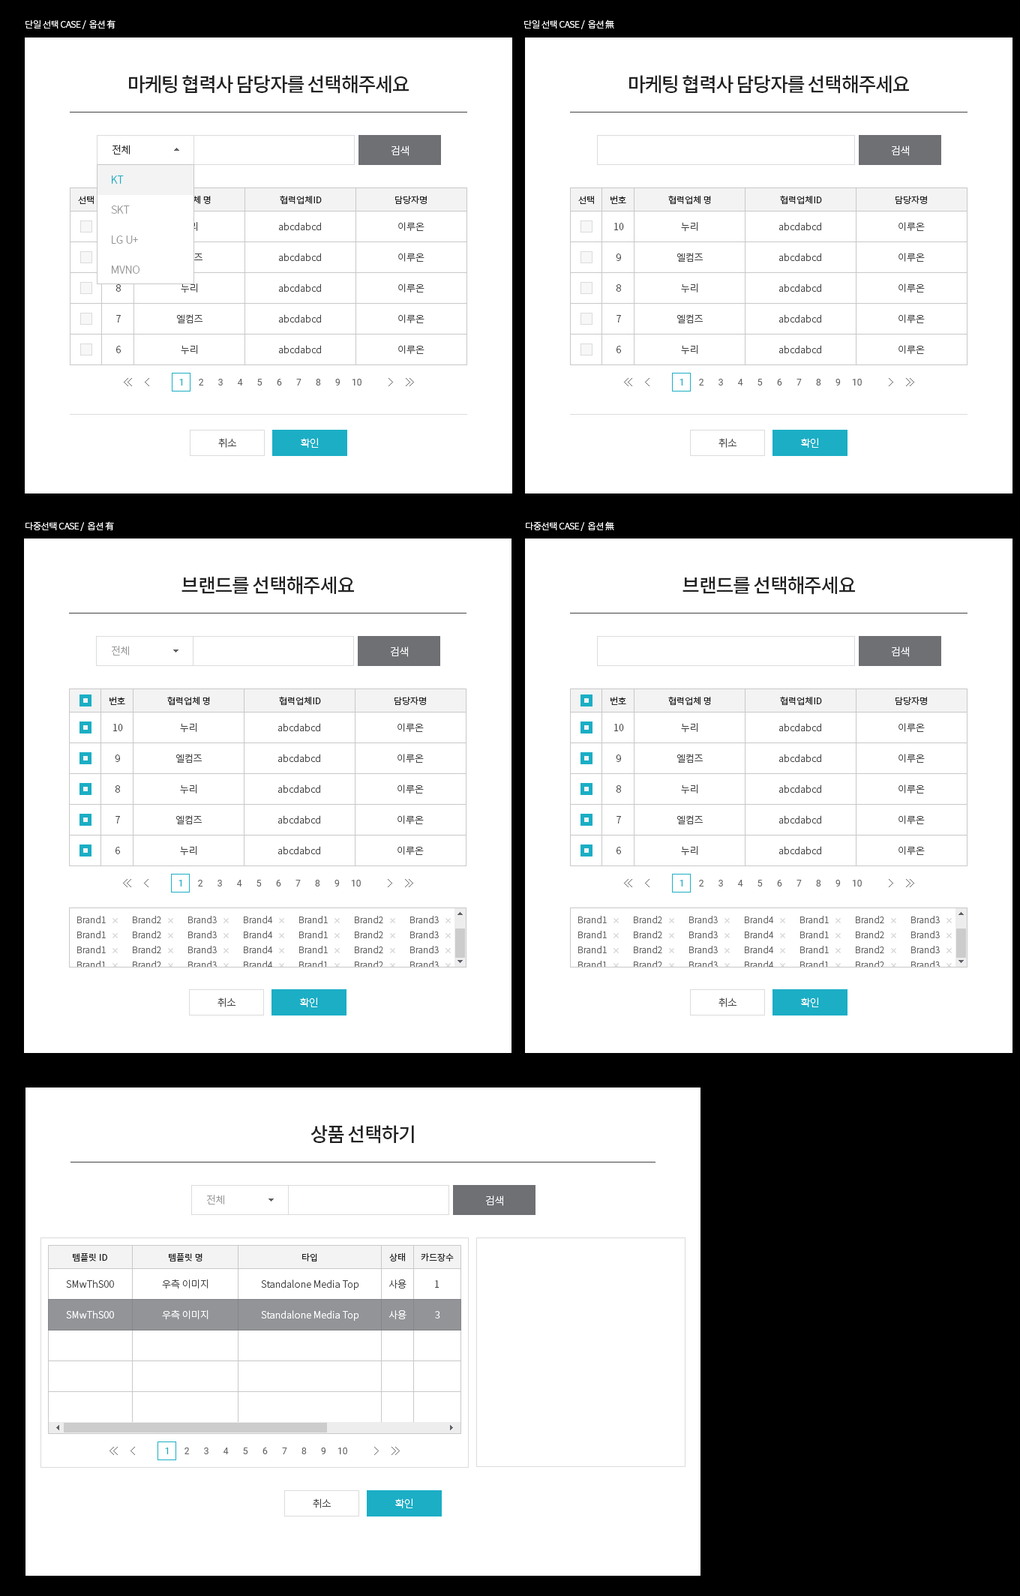
<style>
.page{position:relative;width:1020px;height:1596px;background:#ffffff}
.page>*{position:absolute;margin:0}
.t1{font:9px "NotoSansCJKkr-Light";letter-spacing:-0.03em;color:#ffffff}
.t2{font:19.5px "NotoSansCJKkr-Medium";letter-spacing:-0.05em;color:#222222;text-transform:uppercase}
.t3{font:10.5px "NotoSansCJKkr-Light";letter-spacing:-0.05em;color:#222222}
.t4{font:10.5px "NotoSansCJKkr-Light";letter-spacing:-0.05em;color:#ffffff}
.t5{font:10.5px/30px "NotoSansCJKkr-Light";color:#999999}
.t6{font:10.5px/30px "NotoSansCJKkr-Light";color:#1baec5}
.t7{font:9px "NotoSansCJKkr-Regular";color:#222222}
.t8{font:9px "NotoSansCJKkr-Regular"}
.t9{font:9.8px/30.8px "NotoSansCJKkr-Light";color:#444444}
.t10{font:9.8px/30.8px "NotoSansCJKkr-Light"}
.t11{font:9px "Roboto-Regular";color:#1baec5}
.t12{font:9px "Roboto-Regular";color:#666666}
.t13{font:10.5px "NotoSansCJKkr-Light";letter-spacing:-0.05em;color:#444444;text-transform:uppercase}
.t14{font:10.5px "NotoSansCJKkr-Light";letter-spacing:-0.05em;color:#ffffff;text-transform:uppercase}
.t15{font:10.5px "NotoSansCJKkr-Light";letter-spacing:-0.05em;color:#999999}
.t16{font:9px "NotoSansCJKkr-Light";color:#666666}
.t17{font:9.8px "NotoSansCJKkr-Light";color:#444444}
.t18{font:9.8px "NotoSansCJKkr-Light";color:#ffffff}
</style>
<div class="page">
<p class="t1" style="left:26px;top:20px;width:90px;height:9px">단일 선택 CASE /  옵션 有</p>
<p class="t1" style="left:524px;top:20px;width:90px;height:9px">단일 선택 CASE /  옵션 無</p>
<p class="t2" style="left:129px;top:75px;width:280px;height:19px">마케팅 협력사 담당자를 선택해주세요</p>
<p class="t2" style="left:629px;top:75px;width:280px;height:19px">마케팅 협력사 담당자를 선택해주세요</p>
<p class="t3" style="left:112px;top:145px;width:18px;height:9px">전체</p>
<p class="t3" style="left:112px;top:145px;width:18px;height:9px">전체</p>
<p class="t4" style="left:392px;top:146px;width:17px;height:10px">검색</p>
<p class="t4" style="left:892px;top:146px;width:17px;height:10px">검색</p>
<p class="t5" style="left:111px;top:176px;width:29px;height:98px"><span class="t6">KT<br></span>SKT<br>LG U+ <br>MVNO</p>
<p class="t7" style="left:78px;top:196px;width:16px;height:8px">선택</p>
<p class="t8" style="left:168px;top:195px;width:43px;height:9px">협력업체 명</p>
<p class="t7" style="left:280px;top:195px;width:42px;height:9px">협력업체ID</p>
<p class="t7" style="left:395px;top:195px;width:32px;height:9px">담당자명</p>
<p class="t7" style="left:578px;top:196px;width:16px;height:8px">선택</p>
<p class="t7" style="left:610px;top:196px;width:16px;height:8px">번호</p>
<p class="t7" style="left:668px;top:195px;width:43px;height:9px">협력업체 명</p>
<p class="t7" style="left:780px;top:195px;width:42px;height:9px">협력업체ID</p>
<p class="t7" style="left:896px;top:195px;width:31px;height:9px">담당자명</p>
<p class="t9" style="left:176px;top:222px;width:26px;height:133px;text-align:center">누리<br>엘컴즈<br>누리<br>엘컴즈<br>누리</p>
<p class="t9" style="left:278px;top:222px;width:43px;height:131px">abcdabcd<br>abcdabcd<br>abcdabcd<br>abcdabcd<br>abcdabcd</p>
<p class="t9" style="left:398px;top:222px;width:26px;height:132px">이루온<br>이루온<br>이루온<br>이루온<br>이루온</p>
<p class="t9" style="left:676px;top:222px;width:27px;height:133px;text-align:center">누리<br>엘컴즈<br>누리<br>엘컴즈<br>누리</p>
<p class="t9" style="left:778px;top:222px;width:43px;height:131px">abcdabcd<br>abcdabcd<br>abcdabcd<br>abcdabcd<br>abcdabcd</p>
<p class="t9" style="left:898px;top:222px;width:27px;height:132px">이루온<br>이루온<br>이루온<br>이루온<br>이루온</p>
<p class="t10" style="left:114px;top:223px;width:10px;height:130px;text-align:center">10<br>9<br>8<br>7<br>6</p>
<p class="t9" style="left:614px;top:223px;width:10px;height:130px;text-align:center">10<br>9<br>8<br>7<br>6</p>
<p class="t11" style="left:179px;top:379px;width:4px;height:7px">1</p>
<p class="t12" style="left:199px;top:379px;width:5px;height:7px">2</p>
<p class="t12" style="left:218px;top:379px;width:5px;height:7px">3</p>
<p class="t12" style="left:237px;top:379px;width:6px;height:7px">4</p>
<p class="t12" style="left:257px;top:379px;width:5px;height:7px">5</p>
<p class="t12" style="left:277px;top:379px;width:5px;height:7px">6</p>
<p class="t12" style="left:296px;top:379px;width:6px;height:7px">7</p>
<p class="t12" style="left:316px;top:379px;width:5px;height:7px">8</p>
<p class="t12" style="left:335px;top:379px;width:5px;height:7px">9</p>
<p class="t12" style="left:352px;top:379px;width:10px;height:7px">10</p>
<p class="t11" style="left:680px;top:379px;width:3px;height:7px">1</p>
<p class="t12" style="left:699px;top:379px;width:5px;height:7px">2</p>
<p class="t12" style="left:718px;top:379px;width:5px;height:7px">3</p>
<p class="t12" style="left:737px;top:379px;width:6px;height:7px">4</p>
<p class="t12" style="left:758px;top:379px;width:5px;height:7px">5</p>
<p class="t12" style="left:777px;top:379px;width:5px;height:7px">6</p>
<p class="t12" style="left:796px;top:379px;width:6px;height:7px">7</p>
<p class="t12" style="left:816px;top:379px;width:5px;height:7px">8</p>
<p class="t12" style="left:836px;top:379px;width:5px;height:7px">9</p>
<p class="t12" style="left:852px;top:379px;width:10px;height:7px">10</p>
<p class="t13" style="left:218px;top:438px;width:19px;height:10px">취소</p>
<p class="t14" style="left:301px;top:438px;width:18px;height:10px">확인</p>
<p class="t13" style="left:718px;top:438px;width:19px;height:10px">취소</p>
<p class="t14" style="left:801px;top:438px;width:18px;height:10px">확인</p>
<p class="t1" style="left:26px;top:521px;width:88px;height:10px">다중선택 CASE /  옵션 有</p>
<p class="t1" style="left:526px;top:521px;width:88px;height:10px">다중선택 CASE /  옵션 無</p>
<p class="t2" style="left:182px;top:576px;width:172px;height:19px">브랜드를 선택해주세요</p>
<p class="t2" style="left:682px;top:576px;width:173px;height:19px">브랜드를 선택해주세요</p>
<p class="t15" style="left:112px;top:646px;width:17px;height:10px">전체</p>
<p class="t4" style="left:391px;top:646px;width:17px;height:11px">검색</p>
<p class="t4" style="left:892px;top:646px;width:17px;height:11px">검색</p>
<p class="t7" style="left:110px;top:697px;width:15px;height:8px">번호</p>
<p class="t7" style="left:167px;top:696px;width:43px;height:9px">협력업체 명</p>
<p class="t7" style="left:279px;top:696px;width:42px;height:9px">협력업체ID</p>
<p class="t7" style="left:394px;top:696px;width:32px;height:9px">담당자명</p>
<p class="t7" style="left:610px;top:697px;width:16px;height:8px">번호</p>
<p class="t7" style="left:668px;top:696px;width:43px;height:9px">협력업체 명</p>
<p class="t7" style="left:780px;top:696px;width:42px;height:9px">협력업체ID</p>
<p class="t7" style="left:896px;top:696px;width:31px;height:9px">담당자명</p>
<p class="t9" style="left:113px;top:724px;width:10px;height:130px;text-align:center">10<br>9<br>8<br>7<br>6</p>
<p class="t9" style="left:176px;top:723px;width:26px;height:133px;text-align:center">누리<br>엘컴즈<br>누리<br>엘컴즈<br>누리</p>
<p class="t9" style="left:278px;top:723px;width:42px;height:131px">abcdabcd<br>abcdabcd<br>abcdabcd<br>abcdabcd<br>abcdabcd</p>
<p class="t9" style="left:398px;top:723px;width:26px;height:132px">이루온<br>이루온<br>이루온<br>이루온<br>이루온</p>
<p class="t9" style="left:614px;top:724px;width:10px;height:130px;text-align:center">10<br>9<br>8<br>7<br>6</p>
<p class="t9" style="left:676px;top:723px;width:27px;height:133px;text-align:center">누리<br>엘컴즈<br>누리<br>엘컴즈<br>누리</p>
<p class="t9" style="left:778px;top:723px;width:43px;height:131px">abcdabcd<br>abcdabcd<br>abcdabcd<br>abcdabcd<br>abcdabcd</p>
<p class="t9" style="left:898px;top:723px;width:27px;height:132px">이루온<br>이루온<br>이루온<br>이루온<br>이루온</p>
<p class="t11" style="left:178px;top:880px;width:4px;height:6px">1</p>
<p class="t12" style="left:198px;top:880px;width:5px;height:6px">2</p>
<p class="t12" style="left:218px;top:880px;width:4px;height:6px">3</p>
<p class="t12" style="left:236px;top:880px;width:6px;height:6px">4</p>
<p class="t12" style="left:256px;top:880px;width:6px;height:6px">5</p>
<p class="t12" style="left:276px;top:880px;width:5px;height:6px">6</p>
<p class="t12" style="left:296px;top:880px;width:5px;height:6px">7</p>
<p class="t12" style="left:315px;top:880px;width:5px;height:6px">8</p>
<p class="t12" style="left:334px;top:880px;width:6px;height:6px">9</p>
<p class="t12" style="left:351px;top:880px;width:10px;height:6px">10</p>
<p class="t11" style="left:680px;top:880px;width:3px;height:6px">1</p>
<p class="t12" style="left:699px;top:880px;width:5px;height:6px">2</p>
<p class="t12" style="left:718px;top:880px;width:5px;height:6px">3</p>
<p class="t12" style="left:737px;top:880px;width:6px;height:6px">4</p>
<p class="t12" style="left:758px;top:880px;width:5px;height:6px">5</p>
<p class="t12" style="left:777px;top:880px;width:5px;height:6px">6</p>
<p class="t12" style="left:796px;top:880px;width:6px;height:6px">7</p>
<p class="t12" style="left:816px;top:880px;width:5px;height:6px">8</p>
<p class="t12" style="left:836px;top:880px;width:5px;height:6px">9</p>
<p class="t12" style="left:852px;top:880px;width:10px;height:6px">10</p>
<p class="t16" style="left:77px;top:916px;width:29px;height:7px">Brand1</p>
<p class="t16" style="left:133px;top:916px;width:28px;height:7px">Brand2</p>
<p class="t16" style="left:188px;top:916px;width:29px;height:7px">Brand3</p>
<p class="t16" style="left:244px;top:916px;width:28px;height:7px">Brand4</p>
<p class="t16" style="left:578px;top:916px;width:29px;height:7px">Brand1</p>
<p class="t16" style="left:634px;top:916px;width:28px;height:7px">Brand2</p>
<p class="t16" style="left:689px;top:916px;width:29px;height:7px">Brand3</p>
<p class="t16" style="left:745px;top:916px;width:28px;height:7px">Brand4</p>
<p class="t13" style="left:218px;top:998px;width:18px;height:9px">취소</p>
<p class="t14" style="left:300px;top:998px;width:18px;height:9px">확인</p>
<p class="t13" style="left:718px;top:998px;width:19px;height:9px">취소</p>
<p class="t14" style="left:801px;top:998px;width:18px;height:9px">확인</p>
<p class="t2" style="left:310px;top:1125px;width:104px;height:19px">상품 선택하기</p>
<p class="t15" style="left:207px;top:1195px;width:17px;height:9px">전체</p>
<p class="t4" style="left:486px;top:1196px;width:17px;height:10px">검색</p>
<p class="t7" style="left:73px;top:1253px;width:34px;height:9px">템플릿 ID</p>
<p class="t7" style="left:169px;top:1253px;width:33px;height:9px">템플릿 명</p>
<p class="t7" style="left:302px;top:1253px;width:15px;height:9px">타입</p>
<p class="t7" style="left:389px;top:1252px;width:16px;height:10px">상태</p>
<p class="t7" style="left:421px;top:1252px;width:33px;height:10px">카드장수</p>
<p class="t17" style="left:66px;top:1280px;width:48px;height:8px">SMwThS00</p>
<p class="t17" style="left:162px;top:1279px;width:46px;height:10px">우측 이미지</p>
<p class="t17" style="left:261px;top:1280px;width:98px;height:10px">Standalone Media Top</p>
<p class="t17" style="left:388px;top:1280px;width:18px;height:8px">사용</p>
<p class="t17" style="left:435px;top:1280px;width:5px;height:8px">1</p>
<p class="t18" style="left:66px;top:1310px;width:48px;height:8px">SMwThS00</p>
<p class="t18" style="left:162px;top:1310px;width:46px;height:10px">우측 이미지</p>
<p class="t18" style="left:261px;top:1310px;width:98px;height:11px">Standalone Media Top</p>
<p class="t18" style="left:388px;top:1310px;width:18px;height:9px">사용</p>
<p class="t18" style="left:435px;top:1311px;width:5px;height:7px">3</p>
<p class="t11" style="left:165px;top:1448px;width:4px;height:6px">1</p>
<p class="t12" style="left:184px;top:1448px;width:6px;height:6px">2</p>
<p class="t12" style="left:204px;top:1448px;width:4px;height:6px">3</p>
<p class="t12" style="left:223px;top:1448px;width:6px;height:6px">4</p>
<p class="t12" style="left:243px;top:1448px;width:5px;height:6px">5</p>
<p class="t12" style="left:262px;top:1448px;width:6px;height:6px">6</p>
<p class="t12" style="left:282px;top:1448px;width:5px;height:6px">7</p>
<p class="t12" style="left:302px;top:1448px;width:5px;height:6px">8</p>
<p class="t12" style="left:321px;top:1448px;width:5px;height:6px">9</p>
<p class="t12" style="left:338px;top:1448px;width:9px;height:6px">10</p>
<p class="t13" style="left:313px;top:1498px;width:19px;height:10px">취소</p>
<p class="t14" style="left:395px;top:1498px;width:18px;height:10px">확인</p>
</div>
